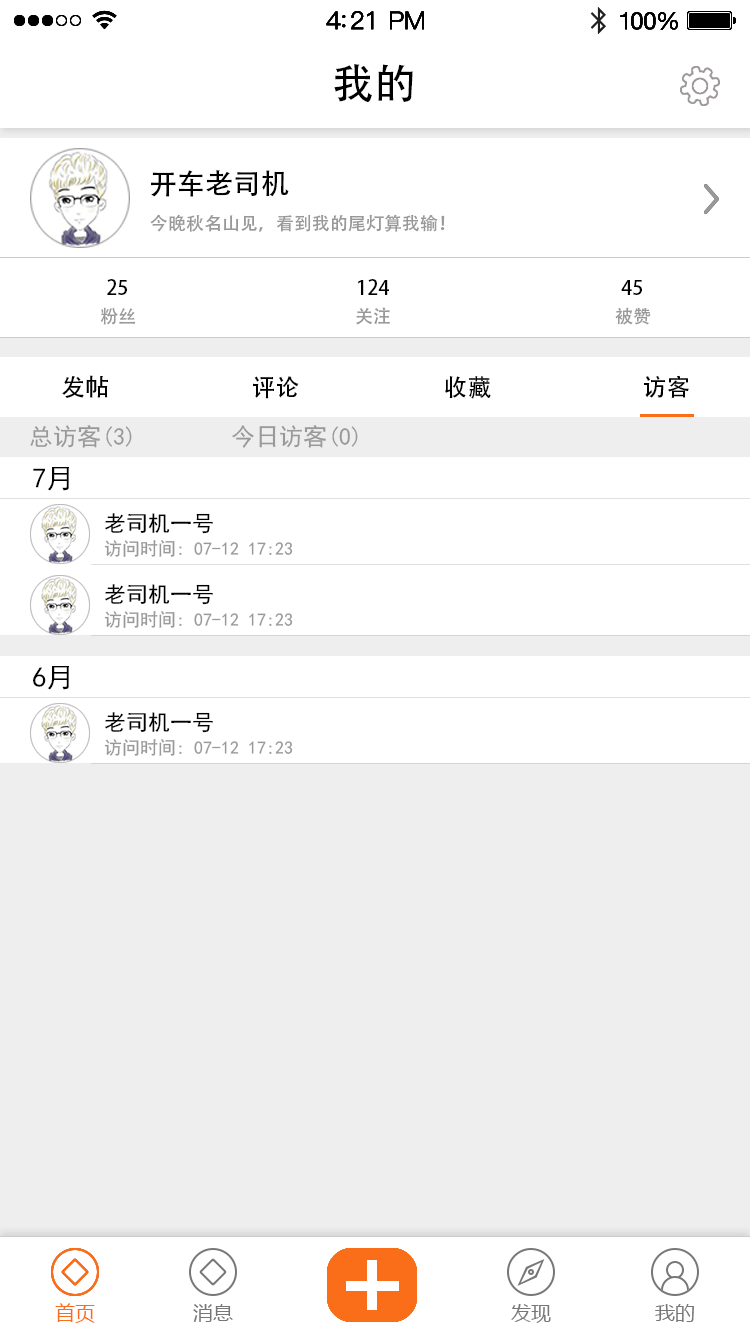
<style>
.page{position:relative;width:750px;height:1334px;background:#ffffff}
.page>*{position:absolute;margin:0}
.t1{font:42px "AdobeHeitiStd-Regular";color:#000000}
.t2{font:28px "AdobeHeitiStd-Regular";color:#000000}
.t3{font:18px "AdobeHeitiStd-Regular";color:#999999}
.t4{font:20px "AdobeHeitiStd-Regular";color:#000000}
.t5{font:24px "AdobeHeitiStd-Regular";color:#000000}
.t6{font:24px "SimHei";color:#999999}
.t7{font:28px "SimHei";color:#000000}
.t8{font:22px "SimHei";color:#000000}
.t9{font:18px "SimHei";color:#999999}
.t10{font:20px "MicrosoftYaHei";color:#fb6e19}
.t11{font:20px "MicrosoftYaHei";color:#777777}
</style>
<div class="page">
<p class="t1" style="left:334px;top:63px;width:79px;height:39px">我的</p>
<p class="t2" style="left:151px;top:170px;width:138px;height:27px">开车老司机</p>
<p class="t3" style="left:150px;top:214px;width:295px;height:18px">今晚秋名山见，看到我的尾灯算我输！</p>
<p class="t4" style="left:107px;top:279px;width:20px;height:16px">25</p>
<p class="t4" style="left:358px;top:279px;width:31px;height:16px">124</p>
<p class="t4" style="left:621px;top:280px;width:21px;height:15px">45</p>
<p class="t3" style="left:100px;top:307px;width:35px;height:18px">粉丝</p>
<p class="t3" style="left:356px;top:307px;width:34px;height:18px">关注</p>
<p class="t3" style="left:615px;top:307px;width:36px;height:18px">被赞</p>
<p class="t5" style="left:62px;top:375px;width:46px;height:23px">发帖</p>
<p class="t5" style="left:253px;top:376px;width:46px;height:23px">评论</p>
<p class="t5" style="left:445px;top:376px;width:46px;height:23px">收藏</p>
<p class="t5" style="left:644px;top:375px;width:45px;height:23px">访客</p>
<p class="t6" style="left:30px;top:425px;width:102px;height:23px">总访客(3)</p>
<p class="t6" style="left:232px;top:425px;width:126px;height:23px">今日访客(0)</p>
<p class="t7" style="left:33px;top:467px;width:36px;height:24px">7月</p>
<p class="t8" style="left:105px;top:513px;width:108px;height:21px">老司机一号</p>
<p class="t9" style="left:104px;top:540px;width:189px;height:17px">访问时间: 07-12 17:23</p>
<p class="t8" style="left:105px;top:584px;width:108px;height:21px">老司机一号</p>
<p class="t9" style="left:104px;top:611px;width:189px;height:17px">访问时间: 07-12 17:23</p>
<p class="t7" style="left:33px;top:666px;width:36px;height:24px">6月</p>
<p class="t8" style="left:105px;top:712px;width:108px;height:21px">老司机一号</p>
<p class="t9" style="left:104px;top:739px;width:189px;height:17px">访问时间: 07-12 17:23</p>
<p class="t10" style="left:55px;top:1303px;width:40px;height:20px">首页</p>
<p class="t11" style="left:193px;top:1304px;width:40px;height:18px">消息</p>
<p class="t11" style="left:511px;top:1304px;width:40px;height:19px">发现</p>
<p class="t11" style="left:655px;top:1304px;width:39px;height:18px">我的</p>
</div>
